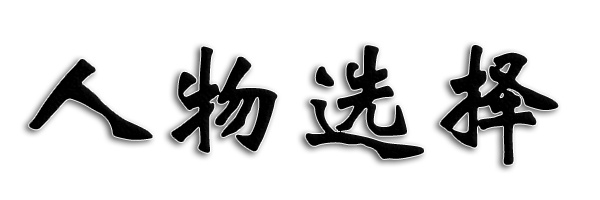
<style>
.page{position:relative;width:600px;height:200px;background:#ffffff}
.page>*{position:absolute;margin:0}
.t1{font:133.3px "STXinwei";color:#000000;font-weight:bold}
</style>
<div class="page">
<p class="t1" style="left:28px;top:44px;width:532px;height:122px">人物选择</p>
</div>
